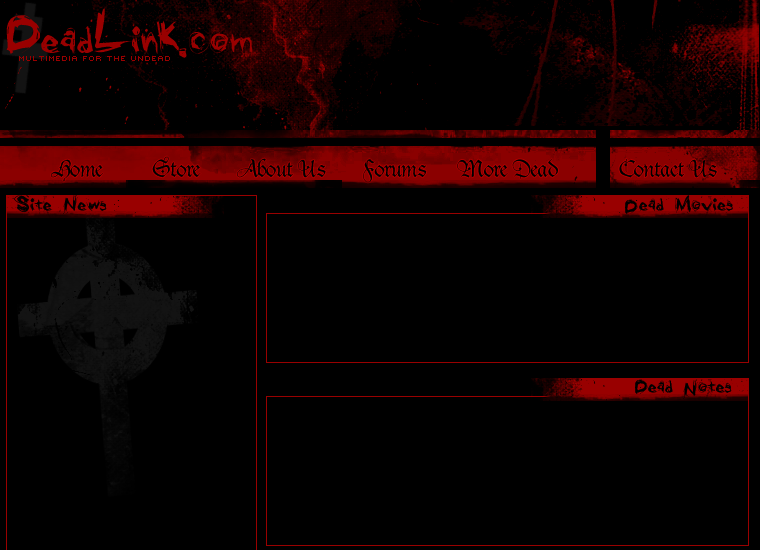
<style>
.page{position:relative;width:760px;height:550px;background:#000000}
.page>*{position:absolute;margin:0}
.t1{font:30px "GrungeUpdate";letter-spacing:-0.025em;color:#990000}
.t2{font:8px "ROTORcapExtended";color:#990000}
.t3{font:24px "Fiorne";letter-spacing:-0.025em;color:#000000}
.t4{font:11px "GrungeUpdate";letter-spacing:-0.025em;color:#000000}
.t5{font:14px "GrungeUpdate";letter-spacing:-0.025em;color:#000000}
.t6{font:11px/14px "GrungeUpdate";letter-spacing:-0.025em;color:#000000}
</style>
<div class="page">
<p class="t1" style="left:6px;top:8px;width:246px;height:50px">DeadLink.com</p>
<p class="t2" style="left:19px;top:56px;width:151px;height:5px">Multimedia for the undead</p>
<p class="t3" style="left:51px;top:159px;width:52px;height:23px">Home</p>
<p class="t3" style="left:152px;top:156px;width:49px;height:22px">Store</p>
<p class="t3" style="left:237px;top:158px;width:89px;height:20px">About Us</p>
<p class="t3" style="left:363px;top:159px;width:64px;height:24px">Forums</p>
<p class="t3" style="left:457px;top:159px;width:101px;height:20px">More Dead</p>
<p class="t3" style="left:619px;top:158px;width:98px;height:20px">Contact Us</p>
<p class="t4" style="left:14px;top:194px;width:15px;height:18px">S</p>
<p class="t5" style="left:30px;top:198px;width:77px;height:13px">ite          ews</p>
<p class="t6" style="left:63px;top:194px;width:15px;height:20px">N</p>
<p class="t5" style="left:639px;top:198px;width:94px;height:13px">ead           ovies</p>
<p class="t4" style="left:675px;top:195px;width:16px;height:18px">M</p>
<p class="t4" style="left:625px;top:199px;width:13px;height:15px">D</p>
<p class="t4" style="left:635px;top:379px;width:13px;height:15px">D</p>
<p class="t5" style="left:648px;top:380px;width:84px;height:13px">ead          otes</p>
<p class="t6" style="left:683px;top:379px;width:15px;height:20px">N</p>
</div>
